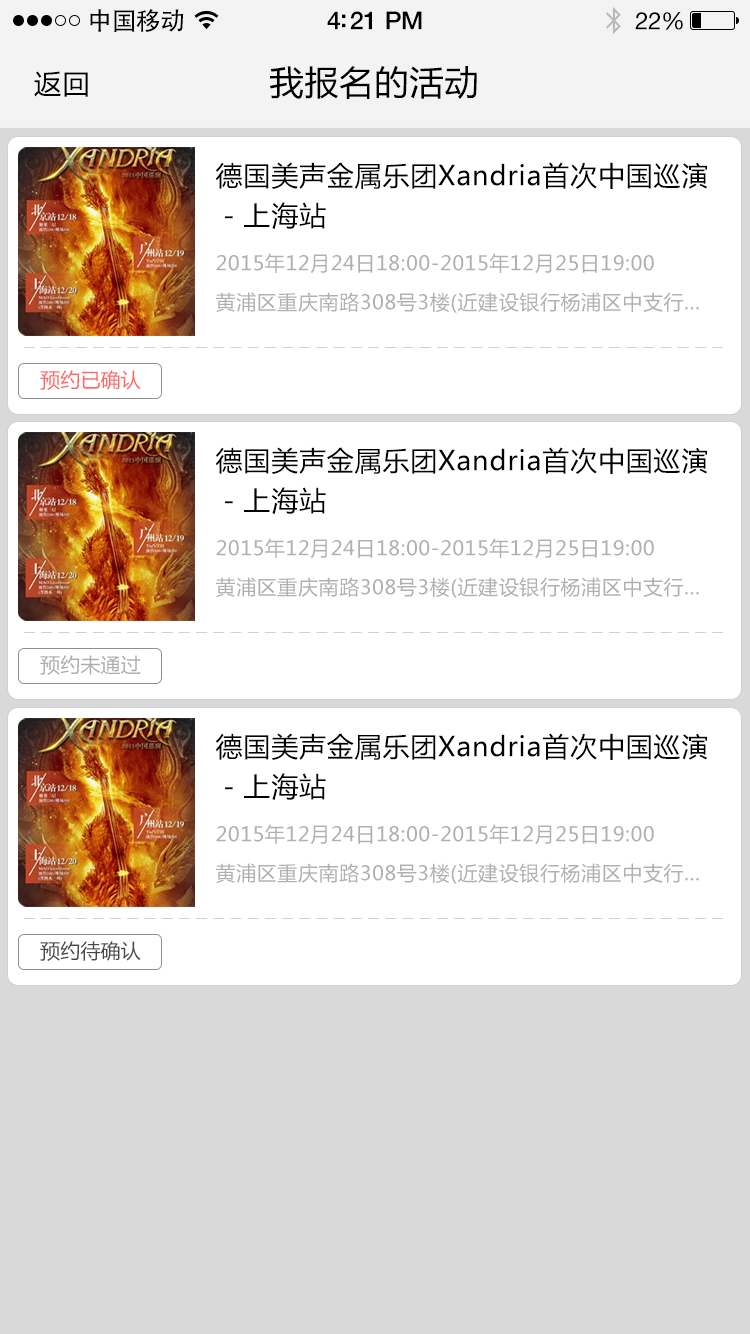
<style>
.page{position:relative;width:750px;height:1334px;background:#ffffff}
.page>*{position:absolute;margin:0}
.t1{font:25px "AdobeHeitiStd-Regular";letter-spacing:-0.025em;color:#000000}
.t2{font:25px "HelveticaNeue-Medium";letter-spacing:-0.02em;color:#000000}
.t3{font:24px "HelveticaNeue";letter-spacing:-0.02em;color:#000000}
.t4{font:27px "MicrosoftYaHei";letter-spacing:0.05em;color:#000000}
.t5{font:34px "MicrosoftYaHei";letter-spacing:0.03em;color:#000000}
.t6{font:27px/70px "MicrosoftYaHei";letter-spacing:0.03em;color:#000000}
.t7{font:20px "MicrosoftYaHei";letter-spacing:0.03em;color:#b0b0b0}
.t8{font:20px "MicrosoftYaHei";letter-spacing:0.01em;color:#ff6666}
.t9{font:20px "MicrosoftYaHei";letter-spacing:0.01em;color:#adadad}
.t10{font:20px "MicrosoftYaHei";letter-spacing:0.01em;color:#555555}
</style>
<div class="page">
<p class="t1" style="left:90px;top:9px;width:94px;height:23px">中国移动</p>
<p class="t2" style="left:327px;top:11px;width:95px;height:19px">4:21 PM</p>
<p class="t3" style="left:635px;top:12px;width:48px;height:18px">22%</p>
<p class="t4" style="left:34px;top:71px;width:54px;height:26px">返回</p>
<p class="t5" style="left:270px;top:66px;width:207px;height:33px">我报名的活动</p>
<p class="t6" style="left:216px;top:162px;width:492px;height:67px">德国美声金属乐团Xandria首次中国巡演<br>－上海站</p>
<p class="t7" style="left:216px;top:253px;width:438px;height:21px">2015年12月24日18:00-2015年12月25日19:00</p>
<p class="t7" style="left:216px;top:292px;width:483px;height:21px">黄浦区重庆南路308号3楼(近建设银行杨浦区中支行...</p>
<p class="t8" style="left:40px;top:370px;width:101px;height:20px">预约已确认</p>
<p class="t6" style="left:216px;top:447px;width:492px;height:67px">德国美声金属乐团Xandria首次中国巡演<br>－上海站</p>
<p class="t7" style="left:216px;top:538px;width:438px;height:21px">2015年12月24日18:00-2015年12月25日19:00</p>
<p class="t7" style="left:216px;top:577px;width:483px;height:21px">黄浦区重庆南路308号3楼(近建设银行杨浦区中支行...</p>
<p class="t9" style="left:40px;top:655px;width:101px;height:20px">预约未通过</p>
<p class="t6" style="left:216px;top:733px;width:492px;height:67px">德国美声金属乐团Xandria首次中国巡演<br>－上海站</p>
<p class="t7" style="left:216px;top:824px;width:438px;height:21px">2015年12月24日18:00-2015年12月25日19:00</p>
<p class="t7" style="left:216px;top:863px;width:483px;height:21px">黄浦区重庆南路308号3楼(近建设银行杨浦区中支行...</p>
<p class="t10" style="left:40px;top:941px;width:101px;height:20px">预约待确认</p>
</div>
